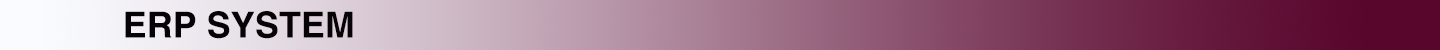
<style>
.page{position:relative;width:1440px;height:50px}
.page>*{position:absolute;margin:0}
.t1{font:36px "Helvetica-Bold";color:#060205}
</style>
<div class="page">
<p class="t1" style="left:125px;top:11px;width:228px;height:28px">ERP SYSTEM</p>
</div>
